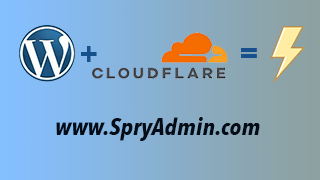
<style>
.page{position:relative;width:320px;height:180px}
.page>*{position:absolute;margin:0}
.t1{font:28px "AvenirNextCondensed-BoldItalic";color:#16508e}
.t2{font:30px "AvenirNextCondensed-BoldItalic";color:#16508e}
.t3{font:24px "AvenirNextCondensed-BoldItalic";color:#030c17}
</style>
<div class="page">
<p class="t1" style="left:81px;top:46px;width:16px;height:16px">+</p>
<p class="t2" style="left:241px;top:48px;width:16px;height:10px">=</p>
<p class="t3" style="left:56px;top:117px;width:204px;height:24px">www.SpryAdmin.com</p>
</div>
